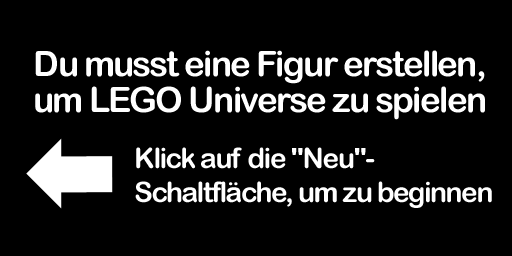
<style>
.page{position:relative;width:512px;height:256px;background:#000000}
.page>*{position:absolute;margin:0}
.t1{font:35px/36px "ArialRoundedMTBold";letter-spacing:-0.05em;color:#ffffff}
.t2{font:28px "ArialRoundedMTBold";letter-spacing:-0.05em;color:#ffffff}
</style>
<div class="page">
<p class="t1" style="left:35px;top:50px;width:450px;height:70px;text-align:center">Du musst eine Figur erstellen,<br>um LEGO Universe zu spielen</p>
<p class="t2" style="left:135px;top:147px;width:357px;height:61px">Klick auf die "Neu"- <br>Schaltfläche, um zu beginnen</p>
</div>
